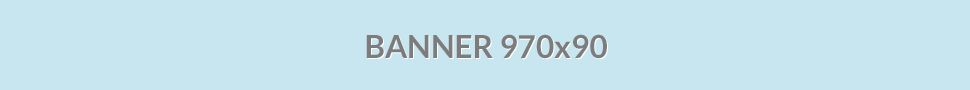
<style>
.page{position:relative;width:970px;height:90px;background:#c8e6f0}
.page>*{position:absolute;margin:0}
.t1{font:31.4px "Lato-Bold";color:#7c7c7c}
</style>
<div class="page">
<p class="t1" style="left:366px;top:34px;width:241px;height:25px">BANNER 970x90</p>
</div>
